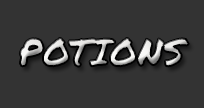
<style>
.page{position:relative;width:204px;height:108px;background:#333333}
.page>*{position:absolute;margin:0}
.t1{font:37.3px "PermanentMarker"}
</style>
<div class="page">
<p class="t1" style="left:19px;top:38px;width:170px;height:29px">POTIONS</p>
</div>
